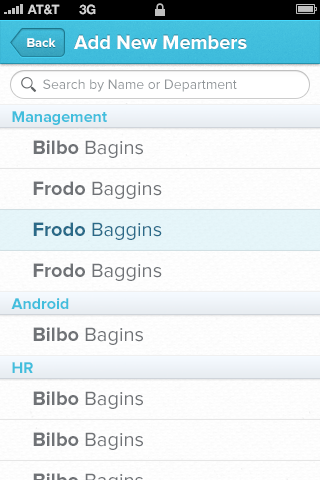
<style>
.page{position:relative;width:320px;height:480px}
.page>*{position:absolute;margin:0}
.t1{font:13px "HelveticaNeue-Bold";color:#d4d4d4;text-transform:uppercase}
.t2{font:13px "ProximaNova-Bold";color:#ffffff}
.t3{font:20px "ProximaNova-Bold";color:#ffffff}
.t4{font:14px "ProximaNova-Regular";color:#919699}
.t5{font:16px "ProximaNova-Bold";color:#41bedd}
.t6{font:20px/41px "ProximaNova-Regular";color:#6f7276}
.t7{font:20px/41px "ProximaNova-Bold";color:#6f7276}
.t8{font:20px/41px "ProximaNova-Bold";color:#2a6a88}
.t9{font:20px/41px "ProximaNova-Regular";color:#2a6a88}
.t10{font:20px "ProximaNova-Regular";color:#6f7276}
.t11{font:20px "ProximaNova-Bold";color:#6f7276}
</style>
<div class="page">
<p class="t1" style="left:27px;top:4px;width:33px;height:11px">AT&amp;t</p>
<p class="t1" style="left:79px;top:4px;width:17px;height:11px">3G</p>
<p class="t2" style="left:27px;top:38px;width:29px;height:9px">Back</p>
<p class="t3" style="left:74px;top:35px;width:173px;height:14px">Add New Members</p>
<p class="t4" style="left:43px;top:79px;width:194px;height:13px">Search by Name or Department</p>
<p class="t5" style="left:12px;top:111px;width:95px;height:14px">Management</p>
<p class="t6" style="left:33px;top:140px;width:129px;height:141px"><span class="t7">Bilbo </span>Bagins<br><span class="t7">Frodo </span>Baggins<br><span class="t8">Frodo </span><span class="t9">Baggins<br></span><span class="t7">Frodo </span>Baggins</p>
<p class="t5" style="left:11px;top:298px;width:58px;height:11px">Android</p>
<p class="t10" style="left:33px;top:327px;width:110px;height:18px"><span class="t11">Bilbo </span>Bagins</p>
<p class="t5" style="left:12px;top:362px;width:21px;height:11px">HR</p>
</div>
